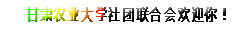
<style>
.page{position:relative;width:250px;height:30px;background:#ffffff}
.page>*{position:absolute;margin:0}
.t1{font:16px "MicrosoftYaHei";letter-spacing:0.06em;font-weight:bold;scale:0.75 1}
</style>
<div class="page">
<p class="t1" style="left:26px;top:7px;width:200px;height:15px">甘肃农业大学社团联合会欢迎你！</p>
</div>
